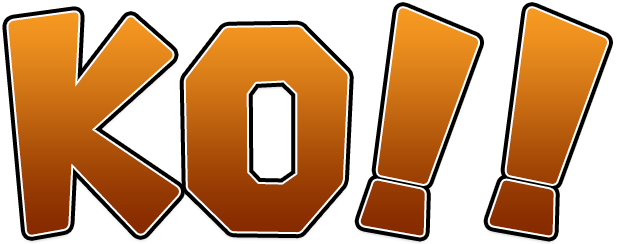
<style>
.page{position:relative;width:617px;height:244px;background:#ffffff}
.page>*{position:absolute;margin:0}
.t1{font:250px "AnnyantRoman"}
</style>
<div class="page">
<p class="t1" style="left:8px;top:8px;width:599px;height:228px">KO!!</p>
</div>
